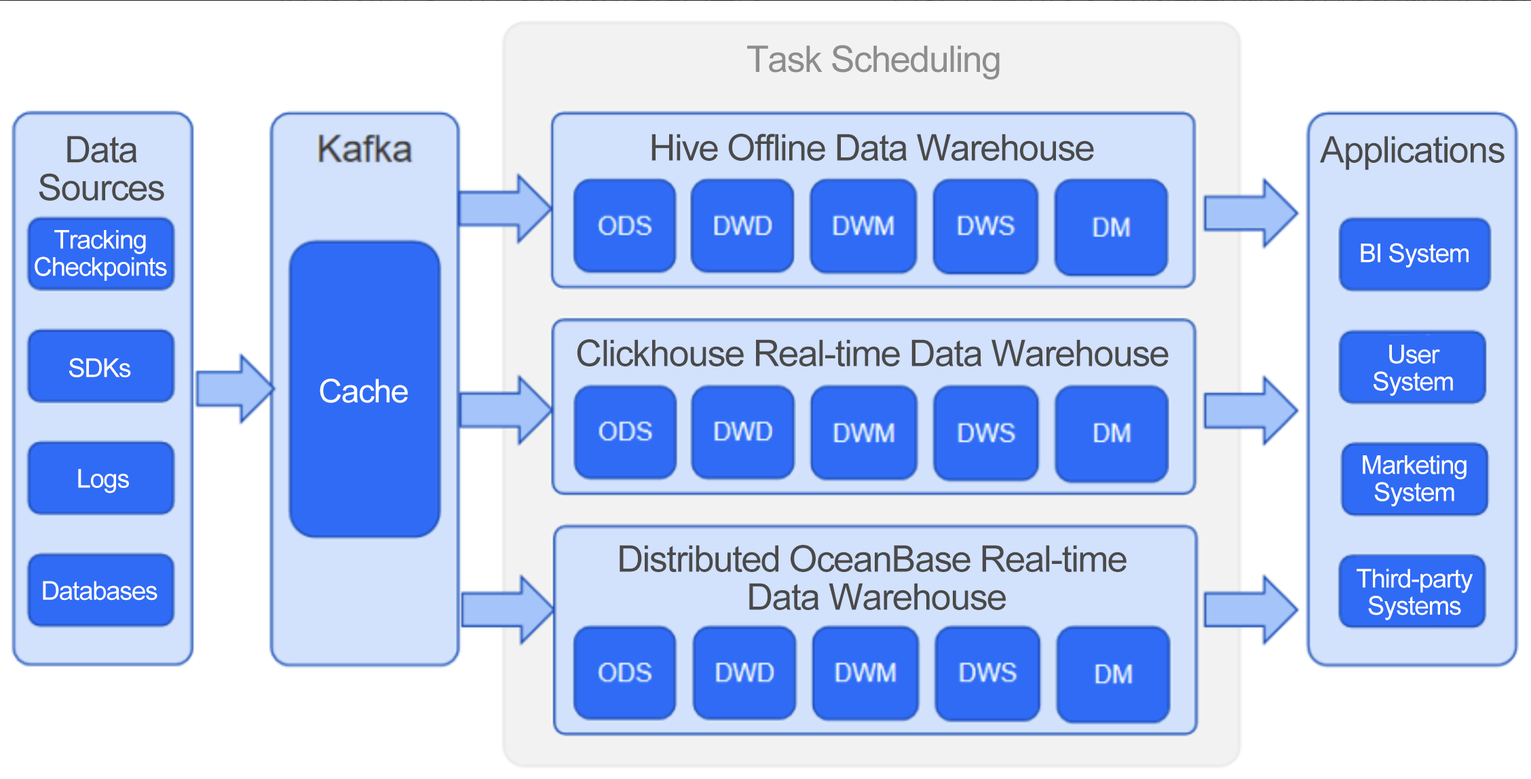
<style>
.page{position:relative;width:1531px;height:779px;background:#ffffff}
.page>*{position:absolute;margin:0}
.t1{font:36.6px "ArialMT";letter-spacing:-0.03em;color:#8e8d8d}
.t2{font:36.6px/38px "ArialMT";letter-spacing:-0.03em;color:#4a4a4a}
.t3{font:36.6px "ArialMT";letter-spacing:-0.03em;color:#4a4a4a}
.t4{font:25.8px/27.1px "ArialMT";letter-spacing:-0.03em;color:#ffffff}
.t5{font:25.8px "ArialMT";letter-spacing:-0.03em;color:#ffffff}
.t6{font:32.6px "ArialMT";letter-spacing:-0.03em;color:#ffffff}
</style>
<div class="page">
<p class="t1" style="left:747px;top:45px;width:252px;height:35px">Task Scheduling</p>
<p class="t2" style="left:39px;top:136px;width:125px;height:65px;text-align:center">Data Sources</p>
<p class="t3" style="left:651px;top:134px;width:443px;height:27px">Hive Offline Data Warehouse</p>
<p class="t3" style="left:1320px;top:136px;width:184px;height:34px">Applications</p>
<p class="t4" style="left:35px;top:230px;width:132px;height:51px;text-align:center">Tracking Checkpoints</p>
<p class="t5" style="left:1360px;top:243px;width:108px;height:25px">BI System</p>
<p class="t3" style="left:577px;top:339px;width:591px;height:27px">Clickhouse Real-time Data Warehouse</p>
<p class="t4" style="left:1373px;top:345px;width:80px;height:51px;text-align:center">User <br>System</p>
<p class="t5" style="left:69px;top:358px;width:62px;height:19px">SDKs</p>
<p class="t6" style="left:320px;top:379px;width:88px;height:24px">Cache</p>
<p class="t4" style="left:1363px;top:455px;width:103px;height:52px;text-align:center">Marketing System</p>
<p class="t5" style="left:78px;top:469px;width:51px;height:24px">Logs</p>
<p class="t2" style="left:620px;top:545px;width:506px;height:65px;text-align:center">Distributed OceanBase Real-time <br>Data Warehouse</p>
<p class="t4" style="left:1356px;top:569px;width:117px;height:51px;text-align:center">Third-party Systems</p>
<p class="t5" style="left:43px;top:581px;width:114px;height:20px">Databases</p>
</div>
